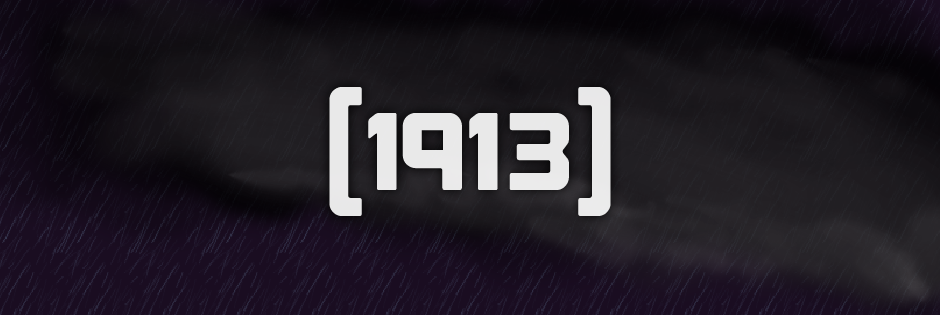
<style>
.page{position:relative;width:940px;height:315px}
.page>*{position:absolute;margin:0}
.t1{font:110px "Outage-Regular";letter-spacing:-0.05em;color:#ffffff}
</style>
<div class="page">
<p class="t1" style="left:329px;top:87px;width:282px;height:129px">(1913)</p>
</div>
